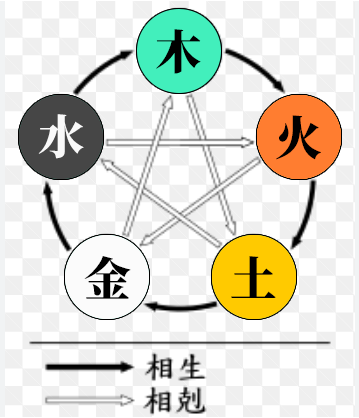
<style>
.page{position:relative;width:359px;height:418px;background:#ffffff}
.page>*{position:absolute;margin:0}
.t1{font:46.7px "SourceHanSerifSC-Heavy";color:#000000}
.t2{font:46.7px "SourceHanSerifSC-Heavy";color:#f9f9f9}
</style>
<div class="page">
<p class="t1" style="left:156px;top:29px;width:45px;height:45px">木</p>
<p class="t2" style="left:38px;top:114px;width:46px;height:45px">水</p>
<p class="t1" style="left:276px;top:115px;width:45px;height:45px">火</p>
<p class="t1" style="left:84px;top:256px;width:47px;height:43px">金</p>
<p class="t1" style="left:231px;top:256px;width:45px;height:42px">土</p>
</div>
